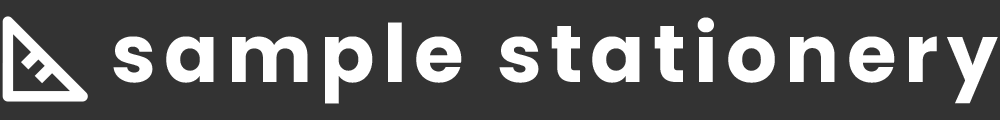
<style>
.page{position:relative;width:1000px;height:120px;background:#333333}
.page>*{position:absolute;margin:0}
.t1{font:80.6px "Poppins-Bold";letter-spacing:0.1em;color:#ffffff}
</style>
<div class="page">
<p class="t1" style="left:113px;top:17px;width:885px;height:87px">sample stationery</p>
</div>
